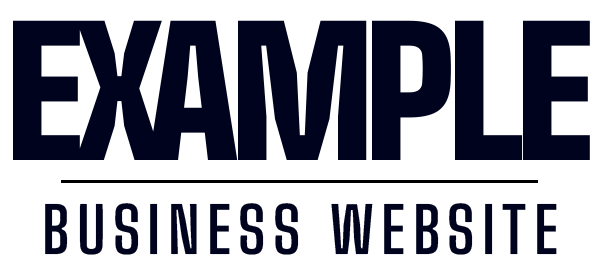
<style>
.page{position:relative;width:600px;height:273px;background:#ffffff}
.page>*{position:absolute;margin:0}
.t1{font:200px "BigShoulders-Black";letter-spacing:-0.05em;color:#00031d;font-variant:small-caps}
.t2{font:72px "BigShoulders-Medium";letter-spacing:0.1em;color:#00031d;font-variant:small-caps}
</style>
<div class="page">
<p class="t1" style="left:13px;top:20px;width:577px;height:140px">example</p>
<p class="t2" style="left:45px;top:203px;width:512px;height:52px">business website</p>
</div>
